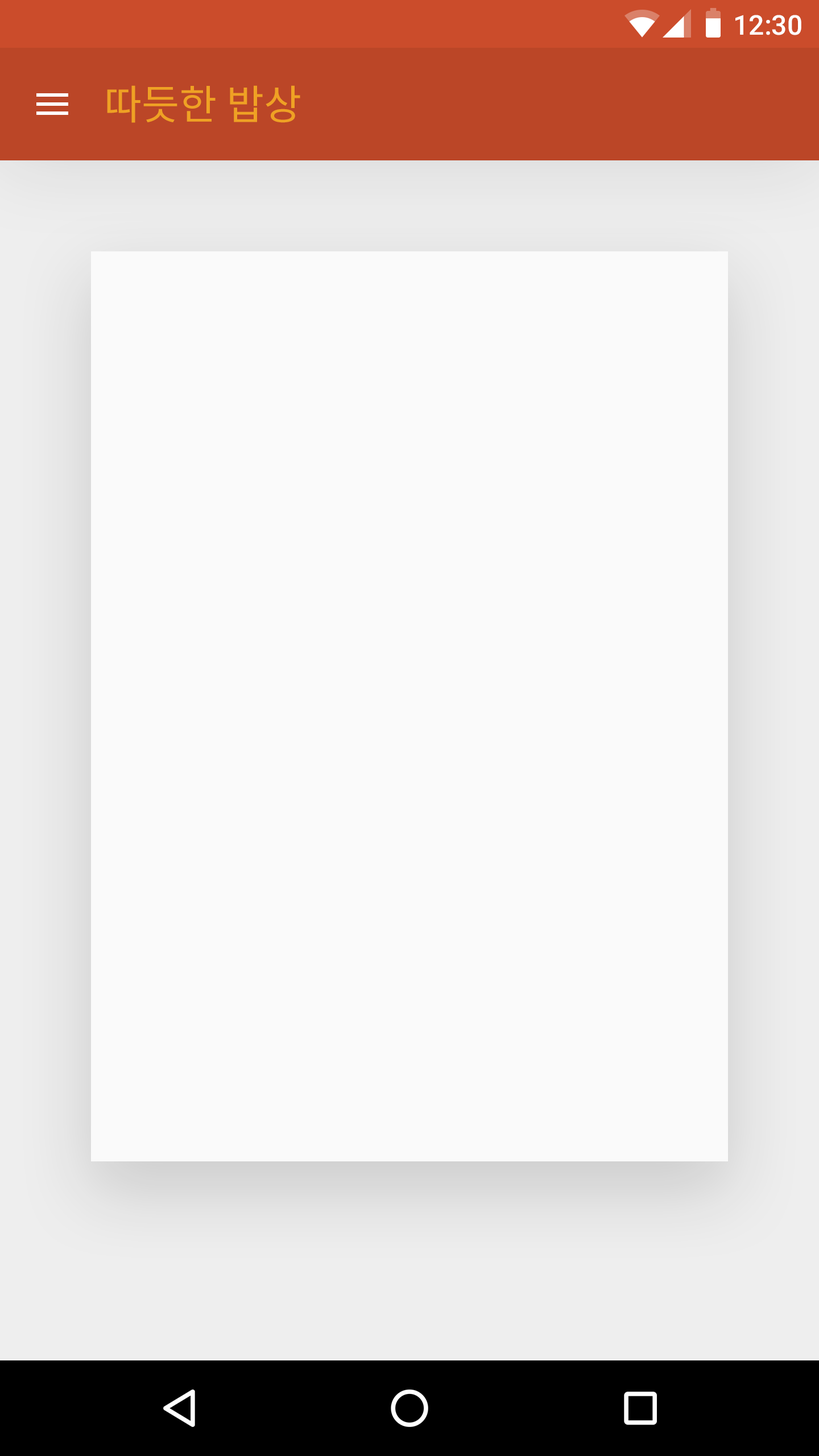
<style>
.page{position:relative;width:819px;height:1456px;background:#fafafa}
.page>*{position:absolute;margin:0}
.t1{font:27.3px "Roboto-Medium";color:#ffffff}
.t2{font:40.9px "NotoSansCJKkr-Regular";color:#efa124}
</style>
<div class="page">
<p class="t1" style="left:735px;top:15px;width:66px;height:20px">12:30</p>
<p class="t2" style="left:107px;top:85px;width:193px;height:38px">따듯한 밥상</p>
</div>
